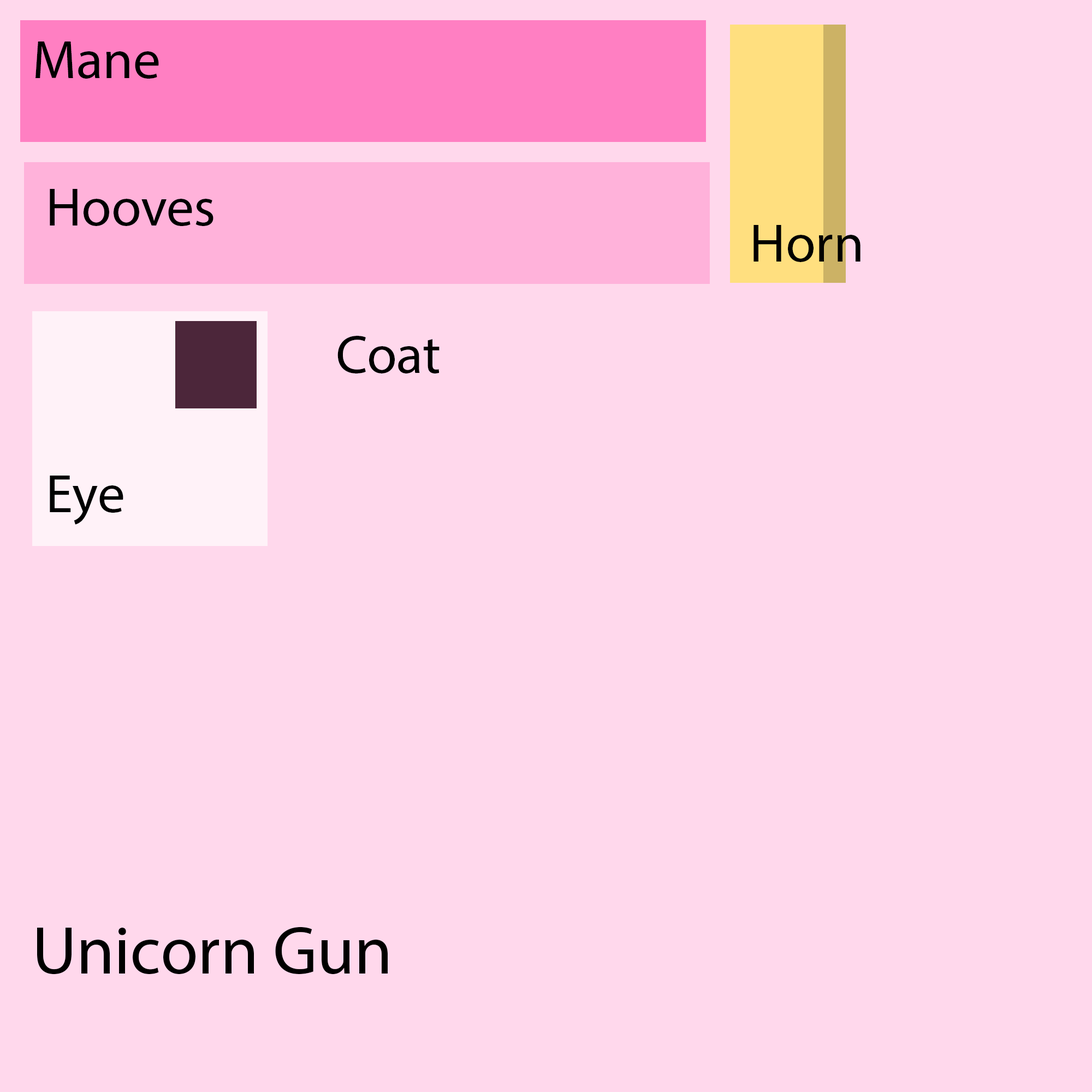
<style>
.page{position:relative;width:1092px;height:1092px;background:#ffd8ec}
.page>*{position:absolute;margin:0}
.t1{font:54.6px "MyriadPro-Regular";color:#000000}
.t2{font:68.2px "MyriadPro-Regular";color:#000000}
</style>
<div class="page">
<p class="t1" style="left:35px;top:41px;width:124px;height:38px">Mane</p>
<p class="t1" style="left:50px;top:189px;width:163px;height:37px">Hooves</p>
<p class="t1" style="left:753px;top:225px;width:107px;height:37px">Horn</p>
<p class="t1" style="left:337px;top:336px;width:103px;height:37px">Coat</p>
<p class="t1" style="left:50px;top:476px;width:73px;height:49px">Eye</p>
<p class="t2" style="left:37px;top:927px;width:351px;height:48px">Unicorn Gun</p>
</div>
